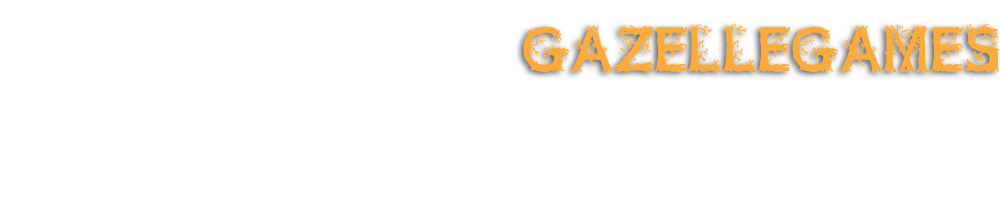
<style>
.page{position:relative;width:1000px;height:210px;background:#ffffff}
.page>*{position:absolute;margin:0}
.t1{font:52.2px "JFWildWood";color:#faab3b}
</style>
<div class="page">
<p class="t1" style="left:523px;top:23px;width:477px;height:50px">GazelleGames</p>
</div>
